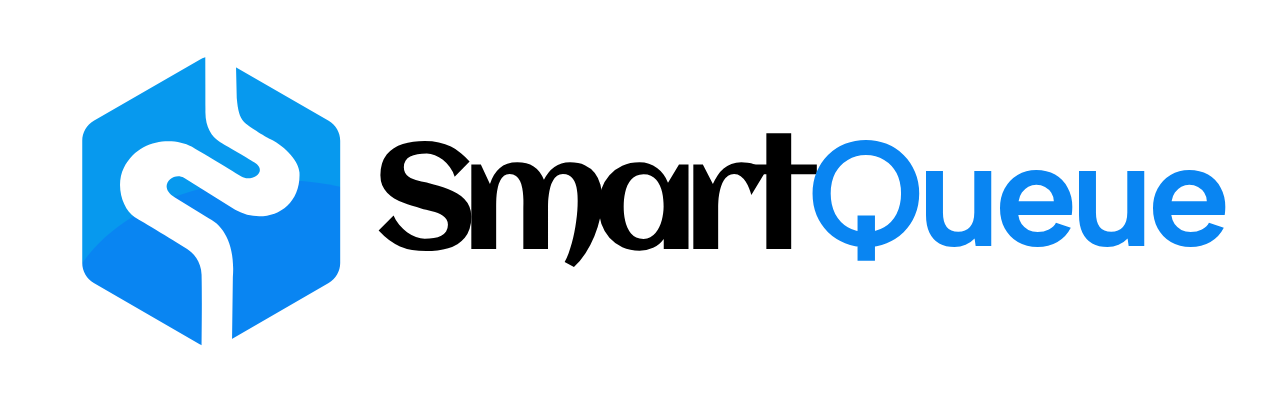
<style>
.page{position:relative;width:1276px;height:394px;background:#ffffff}
.page>*{position:absolute;margin:0}
.t1{font:150px "Aclonica-Regular";letter-spacing:-0.104em;color:#000000}
.t2{font:150px "AlbertSans-SemiBold";letter-spacing:-0.05em;color:#0985f2}
</style>
<div class="page">
<p class="t1" style="left:378px;top:133px;width:439px;height:135px">Smart</p>
<p class="t2" style="left:812px;top:139px;width:414px;height:122px">Queue</p>
</div>
